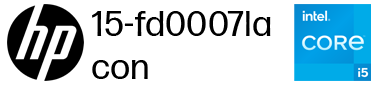
<style>
.page{position:relative;width:377px;height:86px;background:#ffffff}
.page>*{position:absolute;margin:0}
.t1{font:36px "FormaDJRMicro-Regular";color:#000000}
</style>
<div class="page">
<p class="t1" style="left:92px;top:11px;width:179px;height:68px">15-fd0007la<br>con</p>
</div>
